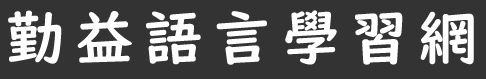
<style>
.page{position:relative;width:486px;height:79px;background:#333333}
.page>*{position:absolute;margin:0}
.t1{font:58.3px "UDDigiKyokashoN-B";letter-spacing:0.18em;color:#fffefe}
</style>
<div class="page">
<p class="t1" style="left:8px;top:10px;width:466px;height:55px">勤益語言學習網</p>
</div>
